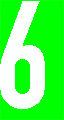
<style>
.page{position:relative;width:64px;height:120px;background:#00ff00}
.page>*{position:absolute;margin:0}
.t1{font:150px "DINCondensed-Bold";color:#fdffff}
</style>
<div class="page">
<p class="t1" style="left:0px;top:1px;width:45px;height:108px">6</p>
</div>
